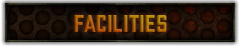
<style>
.page{position:relative;width:241px;height:51px}
.page>*{position:absolute;margin:0}
.t1{font:25px "CaliforniaGothic-Regular"}
</style>
<div class="page">
<p class="t1" style="left:74px;top:15px;width:93px;height:17px">FACILITIES</p>
</div>
